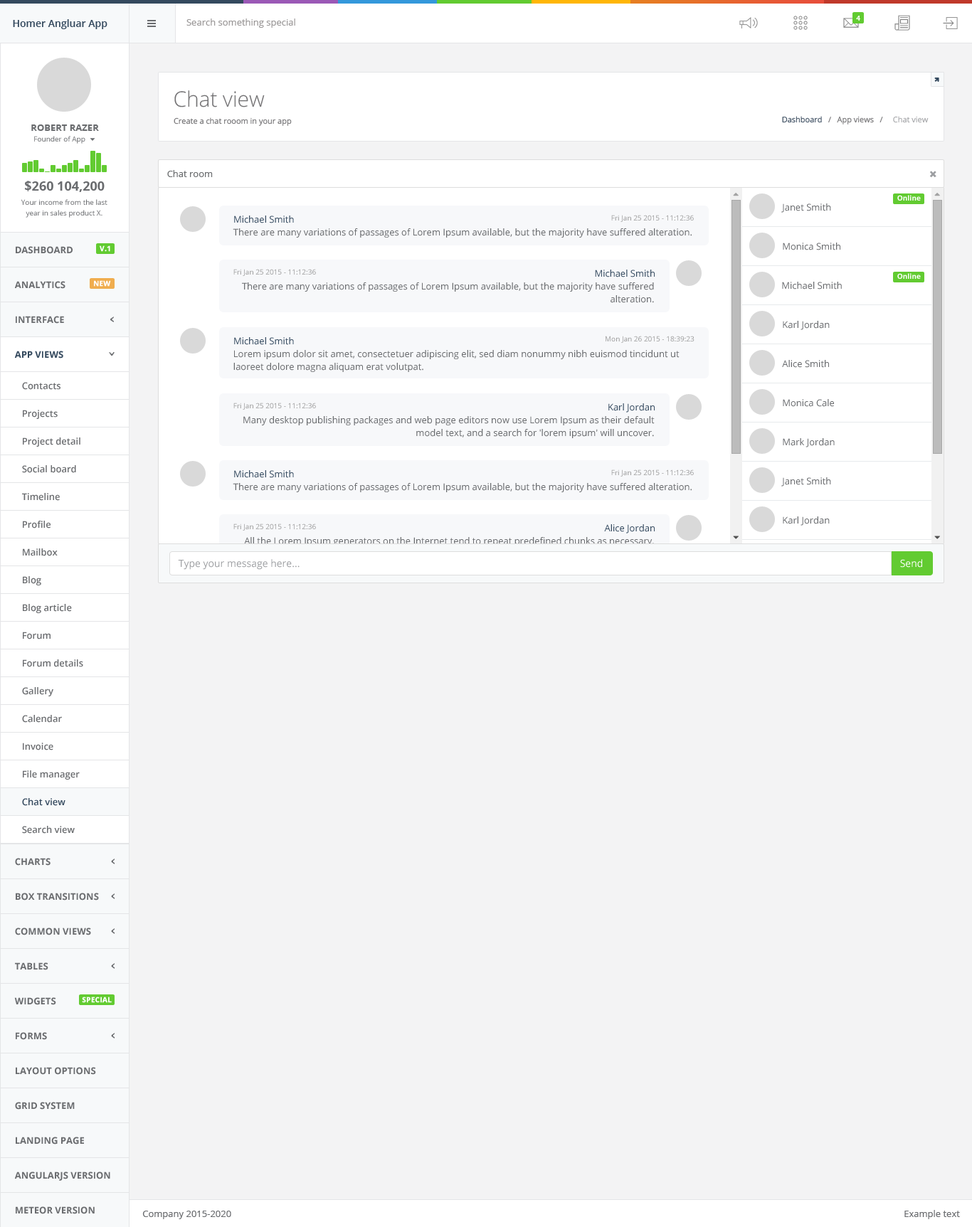
<style>
.page{position:relative;width:972px;height:1227px;background:#f3f3f4}
.page>*{position:absolute;margin:0}
.t1{font:7.1px "OpenSans-Bold";color:#ffffff}
.t2{font:10px "OpenSans-Semibold";color:#34495e}
.t3{font:9.2px "OpenSans";color:#9c9999}
.t4{font:21.3px "OpenSans-Light";color:#727173}
.t5{font:9.2px "OpenSans-Bold";color:#6a6c6f}
.t6{font:7.8px "OpenSans";color:#727173}
.t7{font:7.8px "OpenSans";color:#3c4d60}
.t8{font:7.8px "OpenSans";color:#a5a6a9}
.t9{font:7.1px "OpenSans";color:#6a6c6f}
.t10{font:9.2px "OpenSans";color:#6d7072}
.t11{font:12.8px "OpenSans-Bold";color:#6a6c6f}
.t12{font:7.1px/10.7px "OpenSans";color:#6a6c6f}
.t13{font:9.2px "OpenSans";color:#6a6c6f}
.t14{font:9.2px "OpenSans";color:#374c61}
.t15{font:7.1px "OpenSans";color:#9d9d9d}
.t16{font:7.1px "OpenSans-Bold";color:#ffffff;font-weight:bold}
.t17{font:9.2px/12.8px "OpenSans";color:#6a6c6f}
.t18{font:9.2px "OpenSans-Bold";color:#34495e}
.t19{font:9.2px "OpenSans-Semibold";color:#6a6c6f}
.t20{font:9.2px/12.8px "OpenSans"}
.t21{font:10px "OpenSans";color:#9d9fa2}
.t22{font:10px "OpenSans";color:#ffffff}
.t23{font:9.2px "OpenSans-Semibold";color:#34495e}
</style>
<div class="page">
<p class="t1" style="left:856px;top:16px;width:4px;height:5px">4</p>
<p class="t2" style="left:13px;top:19px;width:94px;height:10px">Homer Angluar App</p>
<p class="t3" style="left:186px;top:18px;width:109px;height:10px">Search something special</p>
<p class="t4" style="left:174px;top:90px;width:91px;height:17px">Chat view</p>
<p class="t5" style="left:31px;top:124px;width:68px;height:7px">ROBERT RAZER</p>
<p class="t6" style="left:174px;top:117px;width:118px;height:9px">Create a chat rooom in your app</p>
<p class="t6" style="left:782px;top:116px;width:146px;height:8px"><span class="t7">Dashboard</span>   /   App views   /    <span class="t8"> Chat view</span></p>
<p class="t9" style="left:34px;top:136px;width:51px;height:8px">Founder of App</p>
<p class="t10" style="left:167px;top:170px;width:46px;height:7px">Chat room</p>
<p class="t11" style="left:25px;top:181px;width:80px;height:11px">$260 104,200</p>
<p class="t1" style="left:897px;top:195px;width:24px;height:6px">Online</p>
<p class="t12" style="left:21px;top:199px;width:86px;height:19px;text-align:center">Your income from the last<br>year in sales product X.</p>
<p class="t13" style="left:781px;top:203px;width:50px;height:10px">Janet Smith</p>
<p class="t14" style="left:234px;top:216px;width:60px;height:7px">Michael Smith</p>
<p class="t15" style="left:611px;top:215px;width:83px;height:7px">Fri Jan 25 2015 - 11:12:36</p>
<p class="t13" style="left:233px;top:228px;width:458px;height:10px">There are many variations of passages of Lorem Ipsum available, but the majority have suffered alteration.</p>
<p class="t16" style="left:100px;top:245px;width:10px;height:7px">V.1</p>
<p class="t13" style="left:783px;top:243px;width:57px;height:7px">Monica Smith</p>
<p class="t5" style="left:16px;top:246px;width:57px;height:8px">DASHBOARD</p>
<p class="t15" style="left:233px;top:269px;width:83px;height:7px">Fri Jan 25 2015 - 11:12:36</p>
<p class="t14" style="left:595px;top:270px;width:59px;height:7px">Michael Smith</p>
<p class="t5" style="left:14px;top:281px;width:51px;height:8px">ANALYTICS</p>
<p class="t16" style="left:94px;top:280px;width:17px;height:7px">NEW</p>
<p class="t13" style="left:782px;top:282px;width:60px;height:8px">Michael Smith</p>
<p class="t1" style="left:897px;top:273px;width:24px;height:6px">Online</p>
<p class="t17" style="left:242px;top:282px;width:412px;height:21px;text-align:right">There are many variations of passages of Lorem Ipsum available, but the majority have suffered alteration.</p>
<p class="t5" style="left:16px;top:316px;width:48px;height:8px">INTERFACE</p>
<p class="t13" style="left:783px;top:321px;width:46px;height:9px">Karl Jordan</p>
<p class="t14" style="left:234px;top:337px;width:60px;height:8px">Michael Smith</p>
<p class="t15" style="left:605px;top:336px;width:89px;height:7px">Mon Jan 26 2015 - 18:39:23</p>
<p class="t18" style="left:14px;top:351px;width:49px;height:8px">APP VIEWS</p>
<p class="t17" style="left:233px;top:350px;width:446px;height:22px">Lorem ipsum dolor sit amet, consectetuer adipiscing elit, sed diam nonummy nibh euismod tincidunt ut laoreet dolore magna aliquam erat volutpat.</p>
<p class="t13" style="left:782px;top:360px;width:47px;height:8px">Alice Smith</p>
<p class="t19" style="left:22px;top:382px;width:38px;height:8px">Contacts</p>
<p class="t13" style="left:783px;top:399px;width:51px;height:8px">Monica Cale</p>
<p class="t19" style="left:23px;top:410px;width:35px;height:9px">Projects</p>
<p class="t15" style="left:233px;top:403px;width:83px;height:7px">Fri Jan 25 2015 - 11:12:36</p>
<p class="t14" style="left:608px;top:403px;width:46px;height:10px">Karl Jordan</p>
<p class="t17" style="left:243px;top:416px;width:411px;height:22px;text-align:right">Many desktop publishing packages and web page editors now use Lorem Ipsum as their default model text, and a search for 'lorem ipsum' will uncover.</p>
<p class="t19" style="left:23px;top:437px;width:57px;height:10px">Project detail</p>
<p class="t13" style="left:783px;top:438px;width:51px;height:9px">Mark Jordan</p>
<p class="t19" style="left:22px;top:465px;width:54px;height:8px">Social board</p>
<p class="t14" style="left:234px;top:470px;width:60px;height:8px">Michael Smith</p>
<p class="t15" style="left:611px;top:470px;width:83px;height:7px">Fri Jan 25 2015 - 11:12:36</p>
<p class="t13" style="left:233px;top:483px;width:458px;height:9px">There are many variations of passages of Lorem Ipsum available, but the majority have suffered alteration.</p>
<p class="t13" style="left:781px;top:477px;width:50px;height:10px">Janet Smith</p>
<p class="t19" style="left:22px;top:493px;width:38px;height:8px">Timeline</p>
<p class="t19" style="left:23px;top:521px;width:28px;height:8px">Profile</p>
<p class="t13" style="left:783px;top:516px;width:46px;height:10px">Karl Jordan</p>
<p class="t15" style="left:233px;top:524px;width:83px;height:7px">Fri Jan 25 2015 - 11:12:36</p>
<p class="t14" style="left:604px;top:524px;width:50px;height:10px">Alice Jordan</p>
<p class="t20" style="left:244px;top:537px;width:410px;height:22px;text-align:right">All the Lorem Ipsum generators on the Internet tend to repeat predefined chunks as necessary, making this the first true generator on the Internet. It uses a dictionary of over 200 Latin words.</p>
<p class="t19" style="left:23px;top:548px;width:35px;height:8px">Mailbox</p>
<p class="t21" style="left:178px;top:559px;width:121px;height:11px">Type your message here...</p>
<p class="t22" style="left:900px;top:559px;width:22px;height:9px">Send</p>
<p class="t19" style="left:23px;top:576px;width:18px;height:9px">Blog</p>
<p class="t19" style="left:23px;top:604px;width:49px;height:9px">Blog article</p>
<p class="t19" style="left:23px;top:632px;width:28px;height:8px">Forum</p>
<p class="t19" style="left:23px;top:659px;width:60px;height:8px">Forum details</p>
<p class="t19" style="left:22px;top:687px;width:31px;height:9px">Gallery</p>
<p class="t19" style="left:22px;top:715px;width:40px;height:8px">Calendar</p>
<p class="t19" style="left:23px;top:743px;width:30px;height:7px">Invoice</p>
<p class="t19" style="left:23px;top:770px;width:57px;height:10px">File manager</p>
<p class="t23" style="left:22px;top:798px;width:43px;height:8px">Chat view</p>
<p class="t19" style="left:22px;top:826px;width:53px;height:8px">Search view</p>
<p class="t5" style="left:15px;top:858px;width:36px;height:8px">CHARTS</p>
<p class="t5" style="left:16px;top:893px;width:83px;height:8px">BOX TRANSITIONS</p>
<p class="t5" style="left:15px;top:928px;width:76px;height:7px">COMMON VIEWS</p>
<p class="t5" style="left:15px;top:962px;width:33px;height:8px">TABLES</p>
<p class="t5" style="left:14px;top:997px;width:42px;height:8px">WIDGETS</p>
<p class="t16" style="left:82px;top:997px;width:30px;height:6px">SPECIAL</p>
<p class="t5" style="left:16px;top:1032px;width:31px;height:8px">FORMS</p>
<p class="t5" style="left:16px;top:1067px;width:80px;height:8px">LAYOUT OPTIONS</p>
<p class="t5" style="left:15px;top:1102px;width:60px;height:8px">GRID SYSTEM</p>
<p class="t5" style="left:16px;top:1137px;width:68px;height:8px">LANDING PAGE</p>
<p class="t5" style="left:14px;top:1172px;width:96px;height:9px">ANGULARJS VERSION</p>
<p class="t5" style="left:16px;top:1206px;width:79px;height:8px">METEOR VERSION</p>
<p class="t13" style="left:142px;top:1211px;width:89px;height:8px">Company 2015-2020</p>
<p class="t13" style="left:904px;top:1210px;width:56px;height:9px">Example text</p>
</div>
